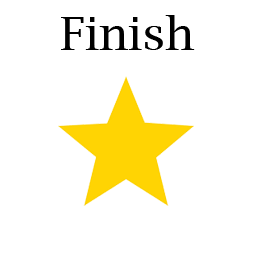
<style>
.page{position:relative;width:256px;height:256px;background:#ffffff}
.page>*{position:absolute;margin:0}
.t1{font:45.8px "LucidaBright";color:#000000}
</style>
<div class="page">
<p class="t1" style="left:61px;top:15px;width:134px;height:35px">Finish</p>
</div>
